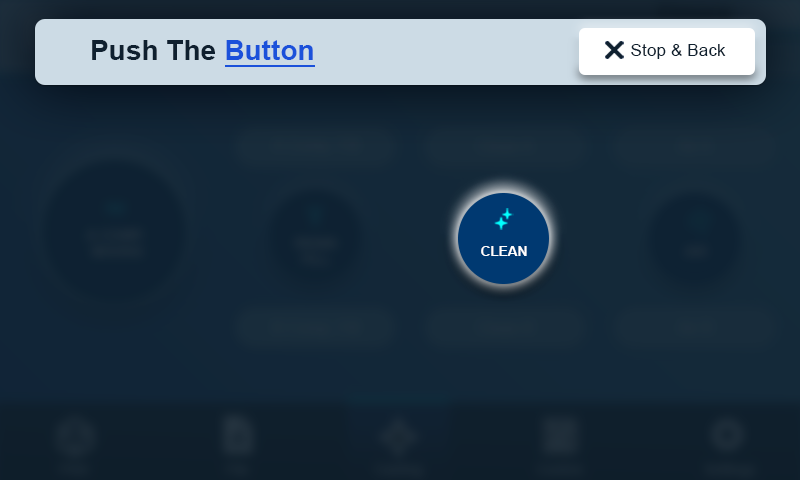
<style>
.page{position:relative;width:800px;height:480px}
.page>*{position:absolute;margin:0}
.t1{font:27.8px "Arial-BoldMT";letter-spacing:0.01em;color:#0f202f}
.t2{font:27.8px "Arial-BoldMT";letter-spacing:0.01em;color:#1b51da}
.t3{font:17.1px "ArialMT";letter-spacing:0.01em;color:#0f202f}
.t4{font:13.5px "Arial-BoldMT";color:#ffffff}
</style>
<div class="page">
<p class="t1" style="left:92px;top:40px;width:221px;height:20px">Push The <span class="t2">Button</span></p>
<p class="t3" style="left:631px;top:44px;width:95px;height:15px">Stop &amp; Back</p>
<p class="t4" style="left:481px;top:246px;width:46px;height:10px">CLEAN</p>
</div>
